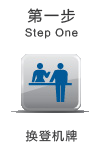
<style>
.page{position:relative;width:97px;height:150px;background:#ffffff}
.page>*{position:absolute;margin:0}
.t1{font:10px/15px "FZLTHJW--GB1-0";letter-spacing:0.1em;color:#373738}
.t2{font:15px/15px "FZLTHJW--GB1-0";letter-spacing:0.1em;color:#373738}
.t3{font:12px "FZLTHJW--GB1-0";letter-spacing:0.1em;color:#373738}
</style>
<div class="page">
<p class="t1" style="left:25px;top:8px;width:53px;height:134px;text-align:center"><span class="t2">第一步<br></span>Step One<br><br><br><br><br><br><span class="t3">换登机牌</span></p>
</div>
